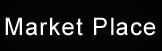
<style>
.page{position:relative;width:162px;height:51px;background:#040404}
.page>*{position:absolute;margin:0}
.t1{font:24px "ArialMT";letter-spacing:0.05em;color:#ffffff}
</style>
<div class="page">
<p class="t1" style="left:5px;top:17px;width:151px;height:19px">Market Place</p>
</div>
